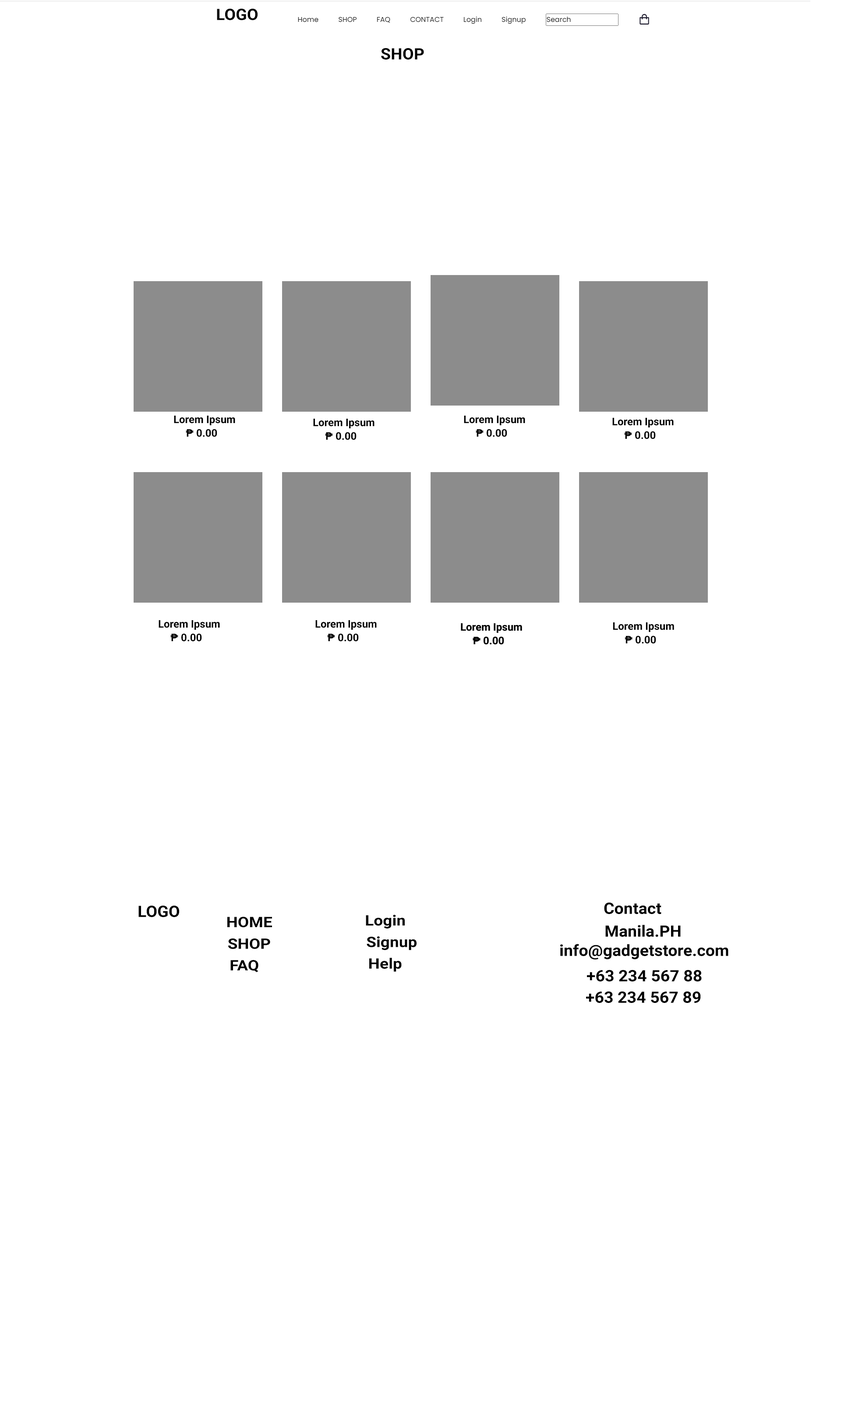
<style>
.page{position:relative;width:841px;height:1419px;background:#ffffff}
.page>*{position:absolute;margin:0}
.t1{font:15.7px "Roboto-Bold";color:#000000;scale:1.05 1}
.t2{font:10.5px "Roboto-Bold";color:#000000}
.t3{font:14.4px "Roboto-Bold";color:#000000;scale:1.13 1}
</style>
<div class="page">
<p class="t1" style="left:217px;top:8px;width:40px;height:12px">LOGO</p>
<p class="t1" style="left:381px;top:48px;width:43px;height:12px">SHOP</p>
<p class="t2" style="left:174px;top:415px;width:61px;height:10px">Lorem Ipsum</p>
<p class="t2" style="left:313px;top:419px;width:61px;height:9px">Lorem Ipsum</p>
<p class="t2" style="left:464px;top:415px;width:61px;height:10px">Lorem Ipsum</p>
<p class="t2" style="left:612px;top:418px;width:61px;height:9px">Lorem Ipsum</p>
<p class="t2" style="left:186px;top:429px;width:31px;height:8px">₱ 0.00</p>
<p class="t2" style="left:325px;top:432px;width:31px;height:8px">₱ 0.00</p>
<p class="t2" style="left:475px;top:429px;width:32px;height:8px">₱ 0.00</p>
<p class="t2" style="left:624px;top:431px;width:31px;height:8px">₱ 0.00</p>
<p class="t2" style="left:158px;top:620px;width:62px;height:10px">Lorem Ipsum</p>
<p class="t2" style="left:315px;top:620px;width:62px;height:10px">Lorem Ipsum</p>
<p class="t2" style="left:461px;top:623px;width:61px;height:10px">Lorem Ipsum</p>
<p class="t2" style="left:461px;top:623px;width:61px;height:10px">Lorem Ipsum</p>
<p class="t2" style="left:613px;top:622px;width:61px;height:10px">Lorem Ipsum</p>
<p class="t2" style="left:170px;top:633px;width:32px;height:8px">₱ 0.00</p>
<p class="t2" style="left:327px;top:633px;width:32px;height:8px">₱ 0.00</p>
<p class="t2" style="left:472px;top:636px;width:32px;height:8px">₱ 0.00</p>
<p class="t2" style="left:472px;top:636px;width:32px;height:8px">₱ 0.00</p>
<p class="t2" style="left:624px;top:635px;width:32px;height:9px">₱ 0.00</p>
<p class="t1" style="left:138px;top:905px;width:41px;height:12px">LOGO</p>
<p class="t1" style="left:604px;top:902px;width:57px;height:12px">Contact</p>
<p class="t3" style="left:227px;top:916px;width:45px;height:11px">HOME</p>
<p class="t3" style="left:366px;top:914px;width:39px;height:14px">Login</p>
<p class="t1" style="left:605px;top:924px;width:75px;height:12px">Manila.PH</p>
<p class="t3" style="left:228px;top:938px;width:42px;height:11px">SHOP</p>
<p class="t3" style="left:366px;top:936px;width:50px;height:14px">Signup</p>
<p class="t1" style="left:560px;top:943px;width:168px;height:16px">info@gadgetstore.com</p>
<p class="t3" style="left:230px;top:960px;width:28px;height:12px">FAQ</p>
<p class="t3" style="left:369px;top:958px;width:32px;height:14px">Help</p>
<p class="t1" style="left:587px;top:969px;width:114px;height:12px">+63 234 567 88</p>
<p class="t1" style="left:586px;top:991px;width:115px;height:12px">+63 234 567 89</p>
</div>
